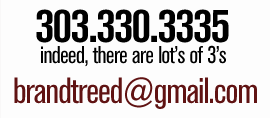
<style>
.page{position:relative;width:270px;height:118px;background:#fdfdfd}
.page>*{position:absolute;margin:0}
.t1{font:48px "AkzidenzGroteskBE-BoldCn";letter-spacing:-0.025em;color:#000000}
.t2{font:24px "AkzidenzGroteskBE-Cn";letter-spacing:-0.025em;color:#000000}
.t3{font:36px "AkzidenzGroteskBE-Cn";letter-spacing:-0.025em;color:#601313}
</style>
<div class="page">
<p class="t1" style="left:36px;top:9px;width:193px;height:34px">303.330.3335</p>
<p class="t2" style="left:41px;top:45px;width:185px;height:22px">indeed, there are lot’s of 3’s</p>
<p class="t3" style="left:14px;top:77px;width:243px;height:32px">brandtreed@gmail.com</p>
</div>
